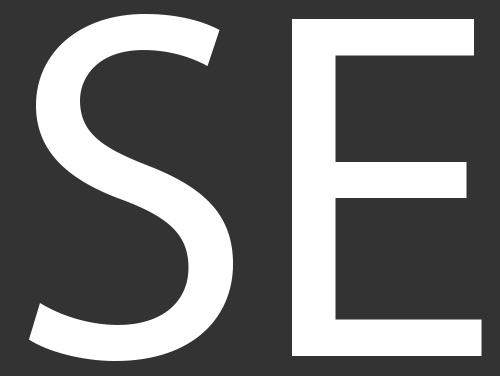
<style>
.page{position:relative;width:500px;height:376px;background:#333333}
.page>*{position:absolute;margin:0}
.t1{font:500px "MyriadPro-Regular";color:#ffffff}
</style>
<div class="page">
<p class="t1" style="left:29px;top:14px;width:453px;height:347px">SE</p>
</div>
